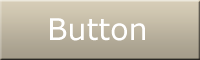
<style>
.page{position:relative;width:200px;height:60px}
.page>*{position:absolute;margin:0}
.t1{font:30px "Verdana";color:#ffffff}
</style>
<div class="page">
<p class="t1" style="left:50px;top:18px;width:95px;height:23px">Button</p>
</div>
